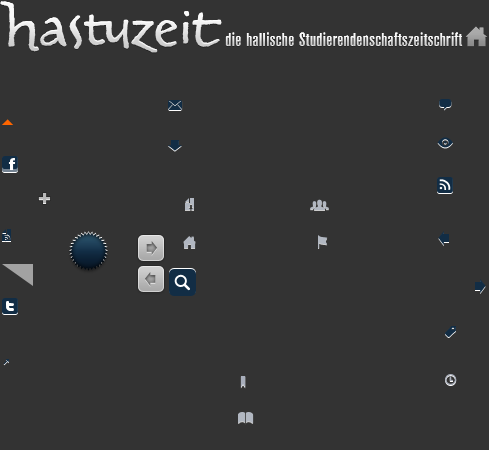
<style>
.page{position:relative;width:489px;height:450px;background:#333333}
.page>*{position:absolute;margin:0}
.t1{font:18.9px "AkzidenzGrotConBQ-Medium";letter-spacing:0.025em}
</style>
<div class="page">
<p class="t1" style="left:225px;top:32px;width:238px;height:14px">die hallische Studierendenschaftszeitschrift</p>
<p class="t1" style="left:225px;top:32px;width:238px;height:14px">die hallische Studierendenschaftszeitschrift</p>
</div>
